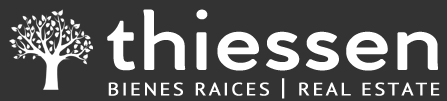
<style>
.page{position:relative;width:447px;height:101px;background:#333333}
.page>*{position:absolute;margin:0}
.t1{font:88.1px "VentiCF-DemiBold";letter-spacing:-0.01em;color:#ffffff;font-weight:bold;scale:1.12 1}
.t2{font:18px "PTSans-Regular";letter-spacing:0.1em;color:#ffffff;font-weight:bold;scale:1.12 1}
.t3{font:24px "PTSans-Regular";letter-spacing:0.1em;color:#ffffff;font-weight:bold;scale:1.12 1}
</style>
<div class="page">
<p class="t1" style="left:107px;top:9px;width:331px;height:62px">thiessen</p>
<p class="t2" style="left:108px;top:78px;width:332px;height:21px">BIENES RAICES <span class="t3">|</span> REAL ESTATE</p>
</div>
